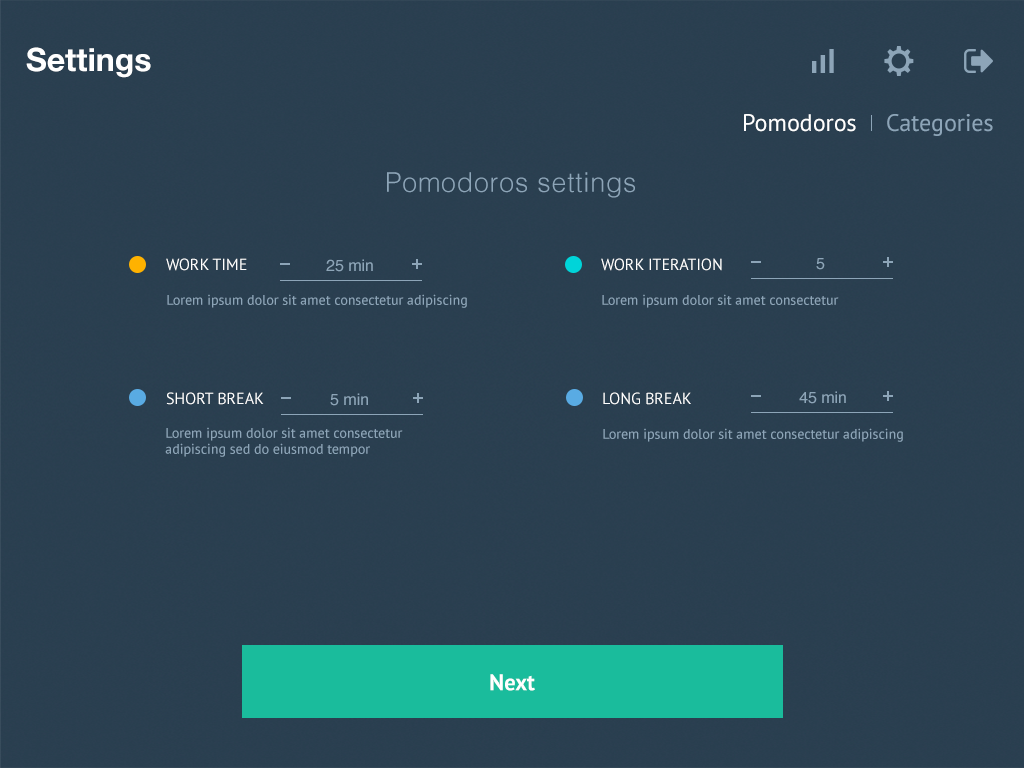
<style>
.page{position:relative;width:1024px;height:768px;background:#2a3f50}
.page>*{position:absolute;margin:0}
.t1{font:32px "HelveticaNeue-Bold";color:#ffffff}
.t2{font:24px "PTSans-Regular";color:#ffffff}
.t3{font:24px "PTSans-Regular";color:#8da5b8}
.t4{font:27px "Helvetica-Light";letter-spacing:0.025em;color:#8da5b8}
.t5{font:16px "PTSans-Regular";color:#ffffff;text-transform:uppercase}
.t6{font:16px "Helvetica";color:#8da5b8}
.t7{font:14px "PTSans-Regular";color:#8da5b8}
.t8{font:14px/16px "PTSans-Regular";color:#8da5b8}
.t9{font:22.6px "PTSans-Bold";color:#ffffff}
</style>
<div class="page">
<p class="t1" style="left:26px;top:47px;width:125px;height:31px">Settings</p>
<p class="t2" style="left:744px;top:114px;width:112px;height:18px">Pomodoros</p>
<p class="t3" style="left:887px;top:114px;width:106px;height:22px">Categories</p>
<p class="t4" style="left:387px;top:172px;width:248px;height:26px">Pomodoros settings</p>
<p class="t5" style="left:166px;top:258px;width:81px;height:13px">Work Time</p>
<p class="t6" style="left:326px;top:259px;width:47px;height:13px">25 min</p>
<p class="t5" style="left:601px;top:258px;width:121px;height:13px">Work Iteration</p>
<p class="t6" style="left:816px;top:258px;width:9px;height:12px">5</p>
<p class="t7" style="left:167px;top:294px;width:300px;height:14px">Lorem ipsum dolor sit amet consectetur adipiscing</p>
<p class="t7" style="left:602px;top:294px;width:237px;height:14px">Lorem ipsum dolor sit amet consectetur</p>
<p class="t5" style="left:166px;top:392px;width:98px;height:13px">Short Break</p>
<p class="t6" style="left:330px;top:393px;width:38px;height:13px">5 min</p>
<p class="t5" style="left:603px;top:392px;width:88px;height:13px">Long Break</p>
<p class="t6" style="left:799px;top:391px;width:47px;height:13px">45 min</p>
<p class="t8" style="left:165px;top:427px;width:238px;height:30px">Lorem ipsum dolor sit amet consectetur adipiscing sed do eiusmod tempor</p>
<p class="t7" style="left:603px;top:428px;width:300px;height:14px">Lorem ipsum dolor sit amet consectetur adipiscing</p>
<p class="t9" style="left:490px;top:674px;width:45px;height:17px">Next</p>
</div>
